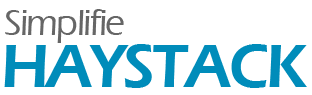
<style>
.page{position:relative;width:312px;height:95px;background:#ffffff}
.page>*{position:absolute;margin:0}
.t1{font:38px "ErasITC-Medium";letter-spacing:-0.05em;color:#666666}
.t2{font:63.3px "ErasITC-Demi";letter-spacing:-0.05em;color:#008cba}
</style>
<div class="page">
<p class="t1" style="left:5px;top:9px;width:119px;height:34px">Simplifie</p>
<p class="t2" style="left:4px;top:44px;width:303px;height:44px">HAYSTACK</p>
</div>
